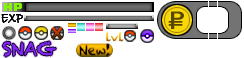
<style>
.page{position:relative;width:244px;height:58px;background:#ffffff}
.page>*{position:absolute;margin:0}
.t1{font:15.6px "BradleyHandITCTT-Bold";letter-spacing:0.03em;color:#000000;text-transform:uppercase;scale:0.73 1}
.t2{font:33.1px "Avenir-Roman";letter-spacing:0.03em}
.t3{font:18px "Chalkduster";color:#8823f9;text-transform:uppercase}
.t4{font:11px "Chalkduster";letter-spacing:0.03em;scale:1.06 1}
</style>
<div class="page">
<p class="t1" style="left:1px;top:14px;width:22px;height:9px">exp</p>
<p class="t1" style="left:1px;top:14px;width:22px;height:9px">exp</p>
<p class="t2" style="left:49px;top:26px;width:16px;height:15px">x</p>
<p class="t3" style="left:2px;top:41px;width:54px;height:16px">snag</p>
<p class="t4" style="left:105px;top:32px;width:19px;height:10px">lvl</p>
</div>
